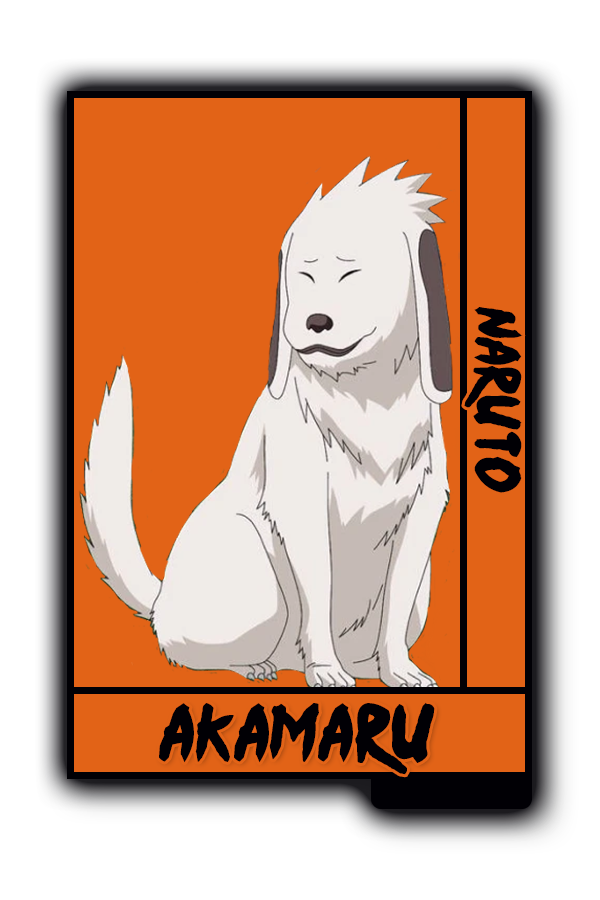
<style>
.page{position:relative;width:600px;height:900px;background:#e26317}
.page>*{position:absolute;margin:0}
.t1{font:52px "Ninja-Naruto";color:#010005}
.t2{font:65.2px "Ninja-Naruto";color:#010005}
</style>
<div class="page">
<p class="t1" style="left:464px;top:307px;width:59px;height:186px;rotate:90deg">Naruto</p>
<p class="t2" style="left:159px;top:702px;width:276px;height:73px">Akamaru</p>
</div>
